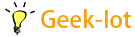
<style>
.page{position:relative;width:135px;height:37px;background:#ffffff}
.page>*{position:absolute;margin:0}
.t1{font:23.7px "AdobeHeitiStd-Regular";color:#f69f09}
</style>
<div class="page">
<p class="t1" style="left:41px;top:9px;width:90px;height:19px">Geek-Iot</p>
</div>
